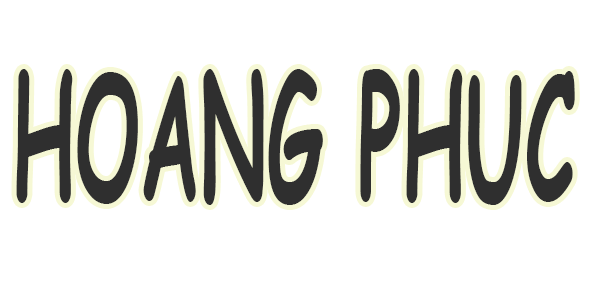
<style>
.page{position:relative;width:600px;height:300px;background:#ffffff}
.page>*{position:absolute;margin:0}
.t1{font:170.5px "ComicSansMS-Bold";color:#2f2f2f;scale:0.48 1}
</style>
<div class="page">
<p class="t1" style="left:16px;top:69px;width:559px;height:136px">HOANG PHUC</p>
</div>
